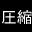
<style>
.page{position:relative;width:32px;height:32px;background:#000000}
.page>*{position:absolute;margin:0}
.t1{font:15.7px "MS-PGothic";color:#ffffff}
</style>
<div class="page">
<p class="t1" style="left:2px;top:10px;width:30px;height:14px">圧縮</p>
</div>
